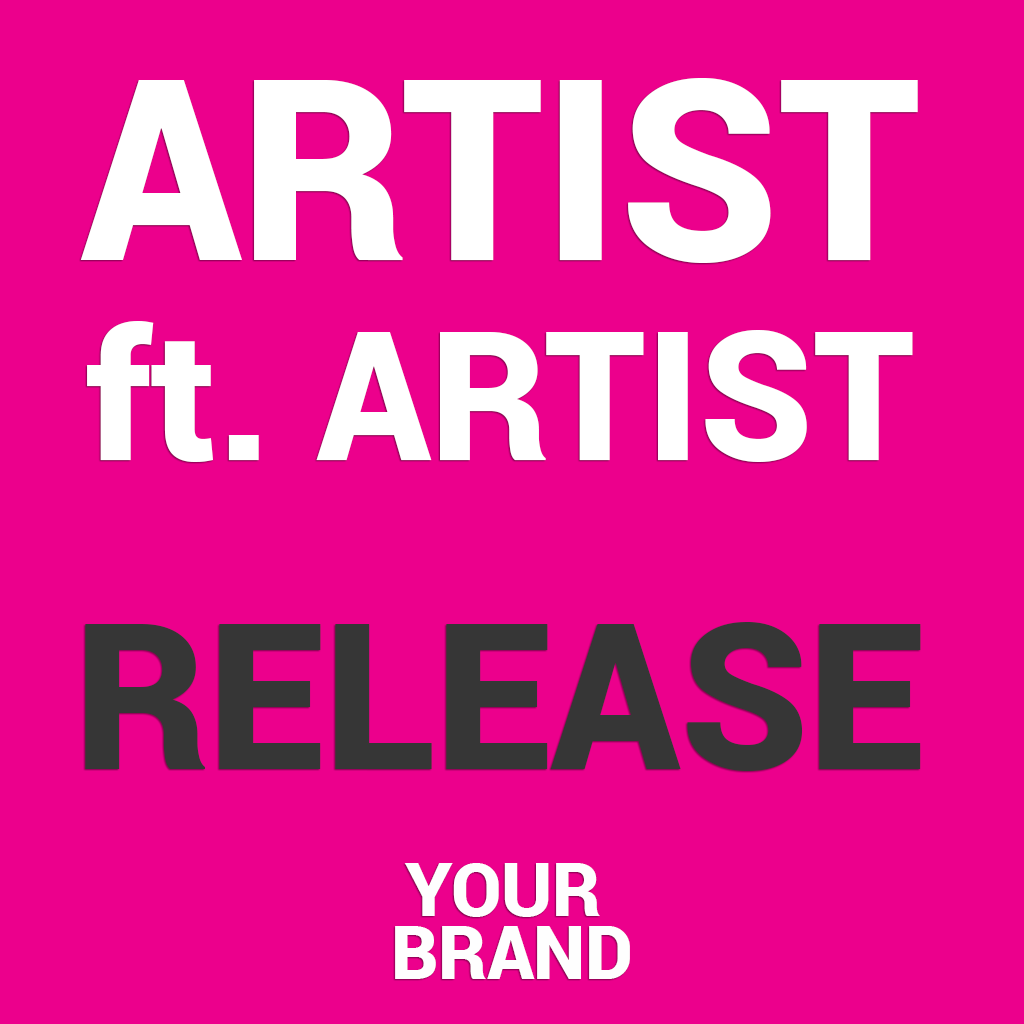
<style>
.page{position:relative;width:1024px;height:1024px;background:#ec008c}
.page>*{position:absolute;margin:0}
.t1{font:180px/200px "Roboto-Black";color:#ffffff}
.t2{font:252.7px/200px "Roboto-Black";color:#ffffff}
.t3{font:203.7px "Roboto-Black";color:#363636}
.t4{font:73.7px/63.3px "Roboto-Black";color:#fefefe}
</style>
<div class="page">
<p class="t1" style="left:80px;top:78px;width:838px;height:384px;text-align:center"><span class="t2">ARTIST<br></span>ft. ARTIST</p>
<p class="t3" style="left:85px;top:622px;width:836px;height:149px">RELEASE</p>
<p class="t4" style="left:395px;top:863px;width:235px;height:116px;text-align:center">YOUR <br>BRAND</p>
</div>
